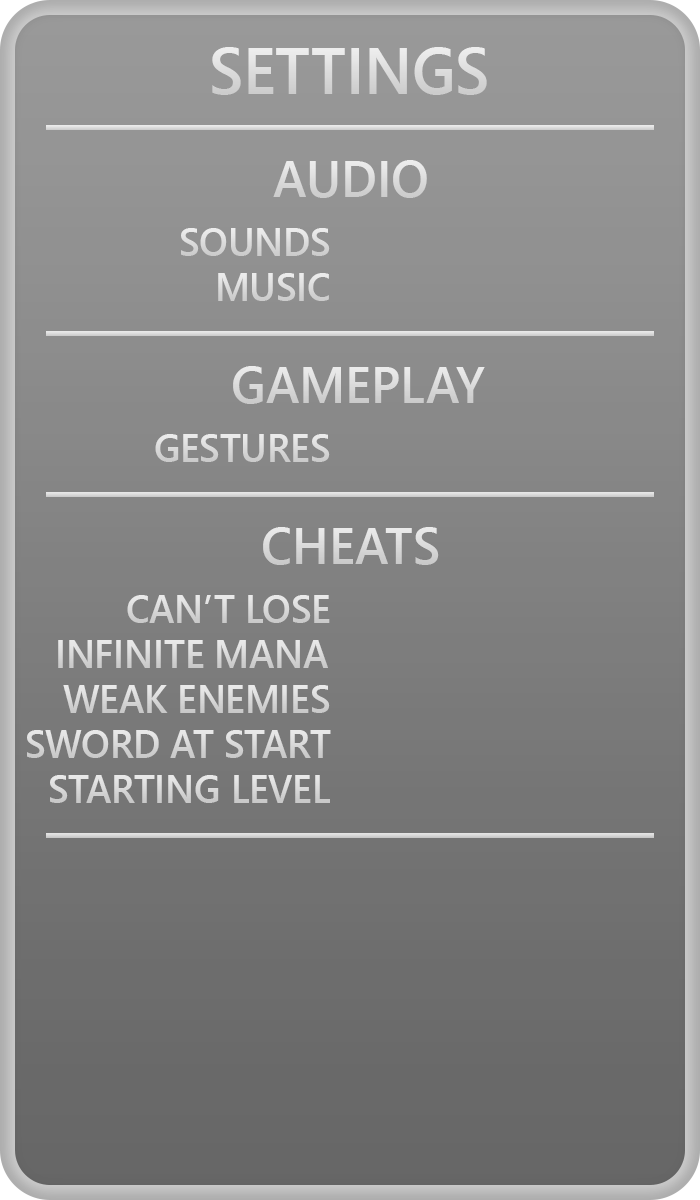
<style>
.page{position:relative;width:700px;height:1200px}
.page>*{position:absolute;margin:0}
.t1{font:65.1px "SegoeUI-Semibold";color:#dddddd;scale:0.96 1}
.t2{font:52.1px "SegoeUI-Semibold";color:#dbdbdb;scale:0.96 1}
.t3{font:39.1px "SegoeUI-Semibold";color:#dbdbdb;scale:0.96 1}
.t4{font:52.1px "SegoeUI-Semibold";color:#dadada;scale:0.96 1}
.t5{font:39.1px "SegoeUI-Semibold";color:#dadada;scale:0.96 1}
.t6{font:39.1px "SegoeUI-Semibold";color:#d9d9d9;scale:0.96 1}
.t7{font:39.1px "SegoeUI-Semibold";color:#d8d8d8;scale:0.96 1}
</style>
<div class="page">
<p class="t1" style="left:212px;top:47px;width:275px;height:48px">SETTINGS</p>
<p class="t2" style="left:273px;top:160px;width:154px;height:38px">AUDIO</p>
<p class="t3" style="left:181px;top:228px;width:149px;height:28px">SOUNDS</p>
<p class="t3" style="left:218px;top:273px;width:111px;height:28px">MUSIC</p>
<p class="t4" style="left:233px;top:366px;width:252px;height:38px">GAMEPLAY</p>
<p class="t5" style="left:155px;top:434px;width:175px;height:28px">GESTURES</p>
<p class="t4" style="left:263px;top:527px;width:176px;height:38px">CHEATS</p>
<p class="t5" style="left:127px;top:595px;width:203px;height:28px">CAN’T LOSE</p>
<p class="t6" style="left:58px;top:640px;width:270px;height:28px">INFINITE MANA</p>
<p class="t6" style="left:63px;top:685px;width:267px;height:28px">WEAK ENEMIES</p>
<p class="t5" style="left:27px;top:730px;width:304px;height:28px">SWORD AT START</p>
<p class="t7" style="left:50px;top:775px;width:280px;height:28px">STARTING LEVEL</p>
</div>
